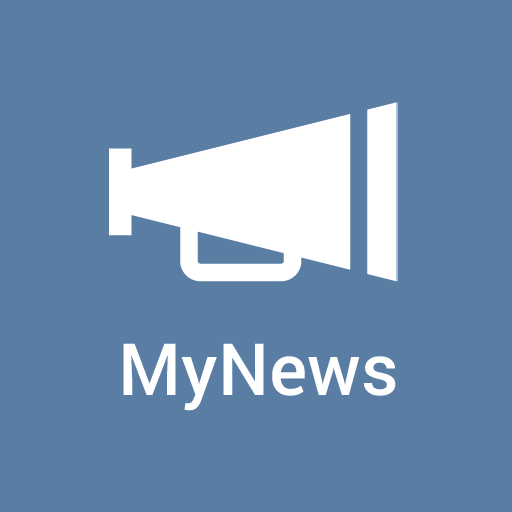
<style>
.page{position:relative;width:512px;height:512px;background:#597da3}
.page>*{position:absolute;margin:0}
.t1{font:72px "Roboto-Medium";color:#ffffff}
</style>
<div class="page">
<p class="t1" style="left:123px;top:343px;width:273px;height:68px">MyNews</p>
</div>
